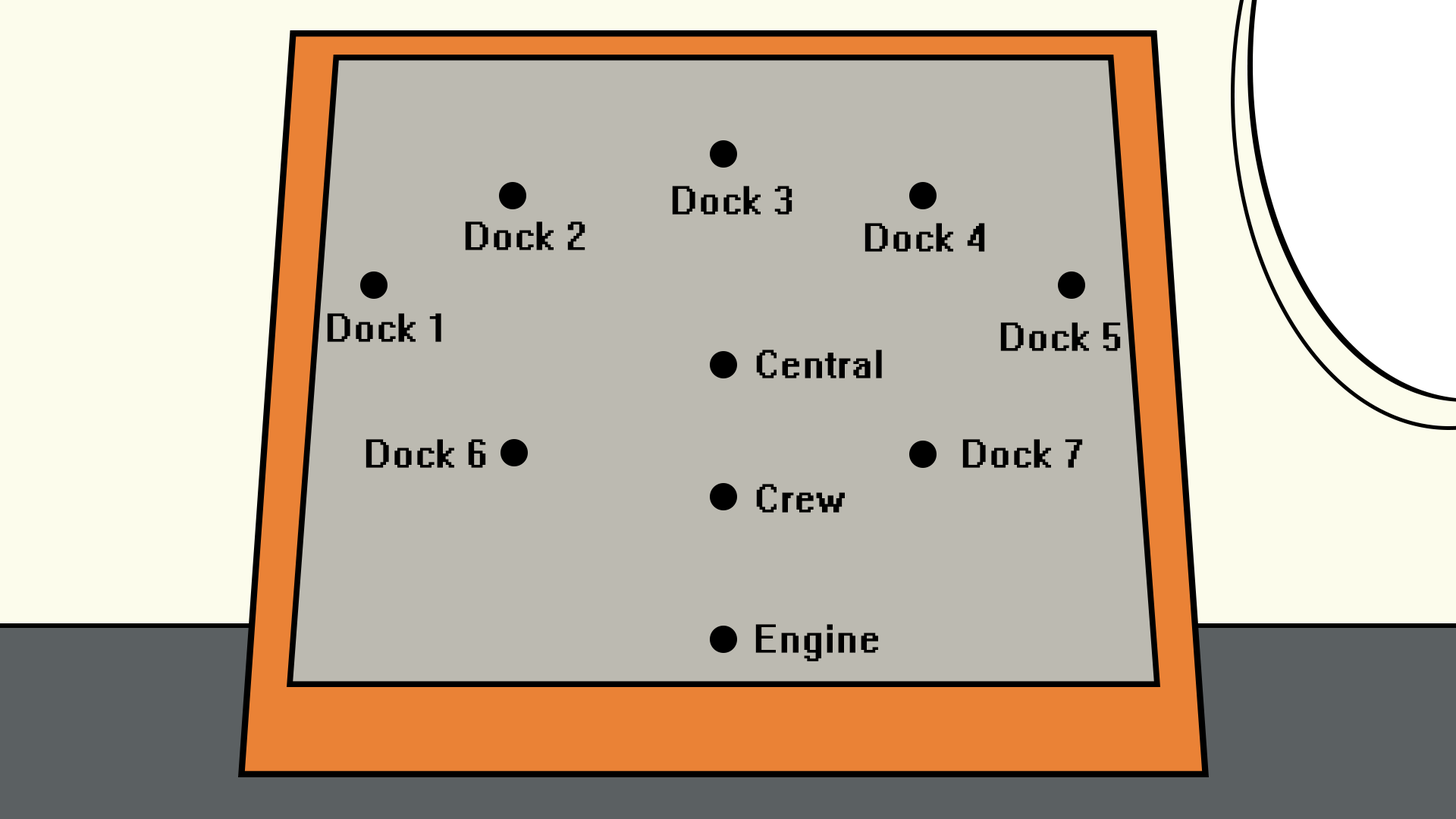
<style>
.page{position:relative;width:1456px;height:819px;background:#bcbab1}
.page>*{position:absolute;margin:0}
.t1{font:36.4px "System";color:#000000}
</style>
<div class="page">
<p class="t1" style="left:672px;top:186px;width:120px;height:29px">Dock 3</p>
<p class="t1" style="left:465px;top:221px;width:120px;height:29px">Dock 2</p>
<p class="t1" style="left:864px;top:223px;width:121px;height:29px">Dock 4</p>
<p class="t1" style="left:327px;top:313px;width:114px;height:29px">Dock 1</p>
<p class="t1" style="left:1000px;top:322px;width:121px;height:29px">Dock 5</p>
<p class="t1" style="left:756px;top:350px;width:126px;height:28px">Central</p>
<p class="t1" style="left:366px;top:439px;width:120px;height:29px">Dock 6</p>
<p class="t1" style="left:962px;top:439px;width:121px;height:29px">Dock 7</p>
<p class="t1" style="left:756px;top:484px;width:89px;height:29px">Crew</p>
<p class="t1" style="left:755px;top:624px;width:123px;height:37px">Engine</p>
</div>
